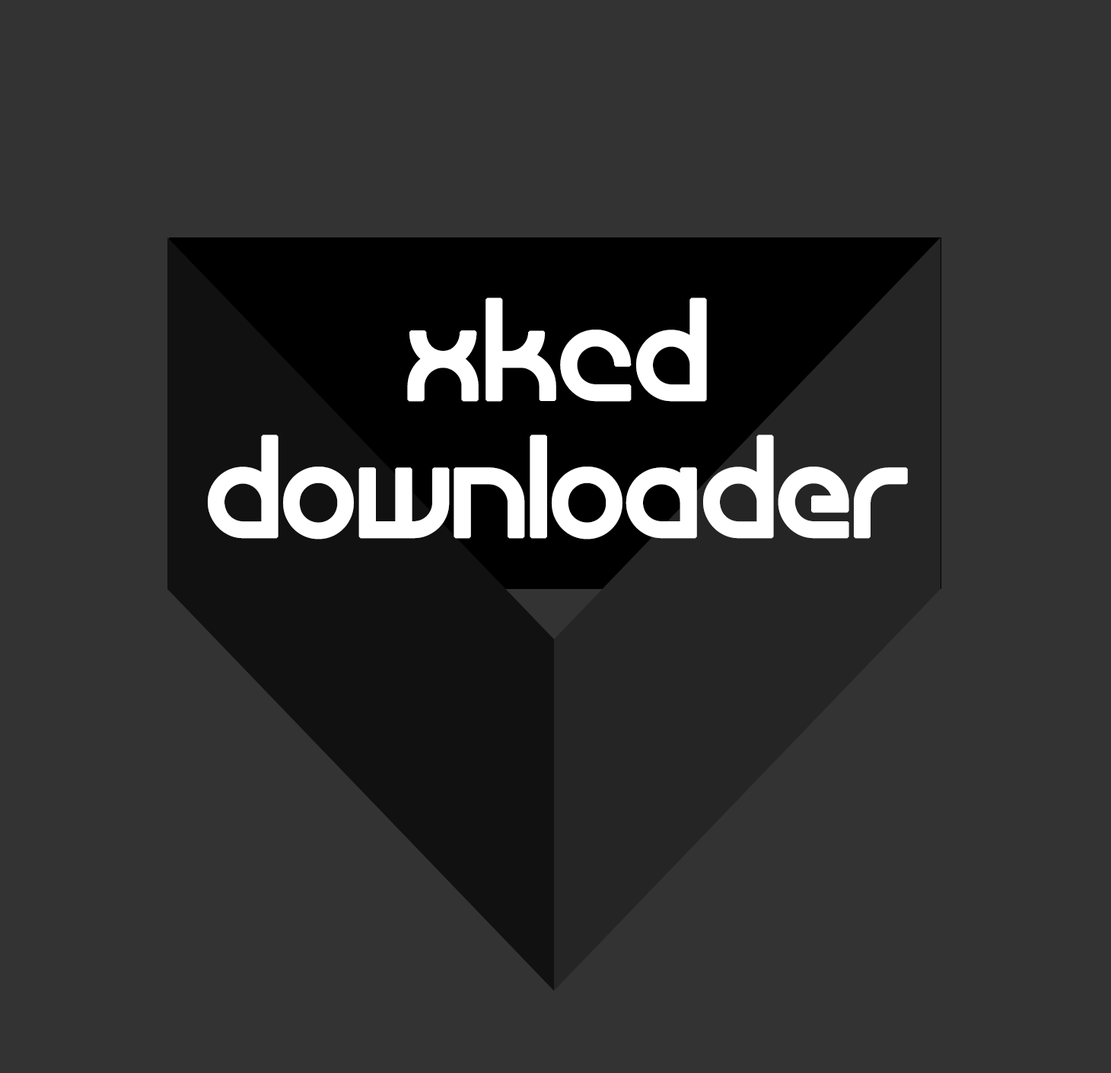
<style>
.page{position:relative;width:1111px;height:1073px;background:#333333}
.page>*{position:absolute;margin:0}
.t1{font:114.2px "Atiba-Regular";color:#ffffff;font-weight:bold}
</style>
<div class="page">
<p class="t1" style="left:208px;top:298px;width:700px;height:242px;text-align:center">xkcd<br>downloader</p>
</div>
